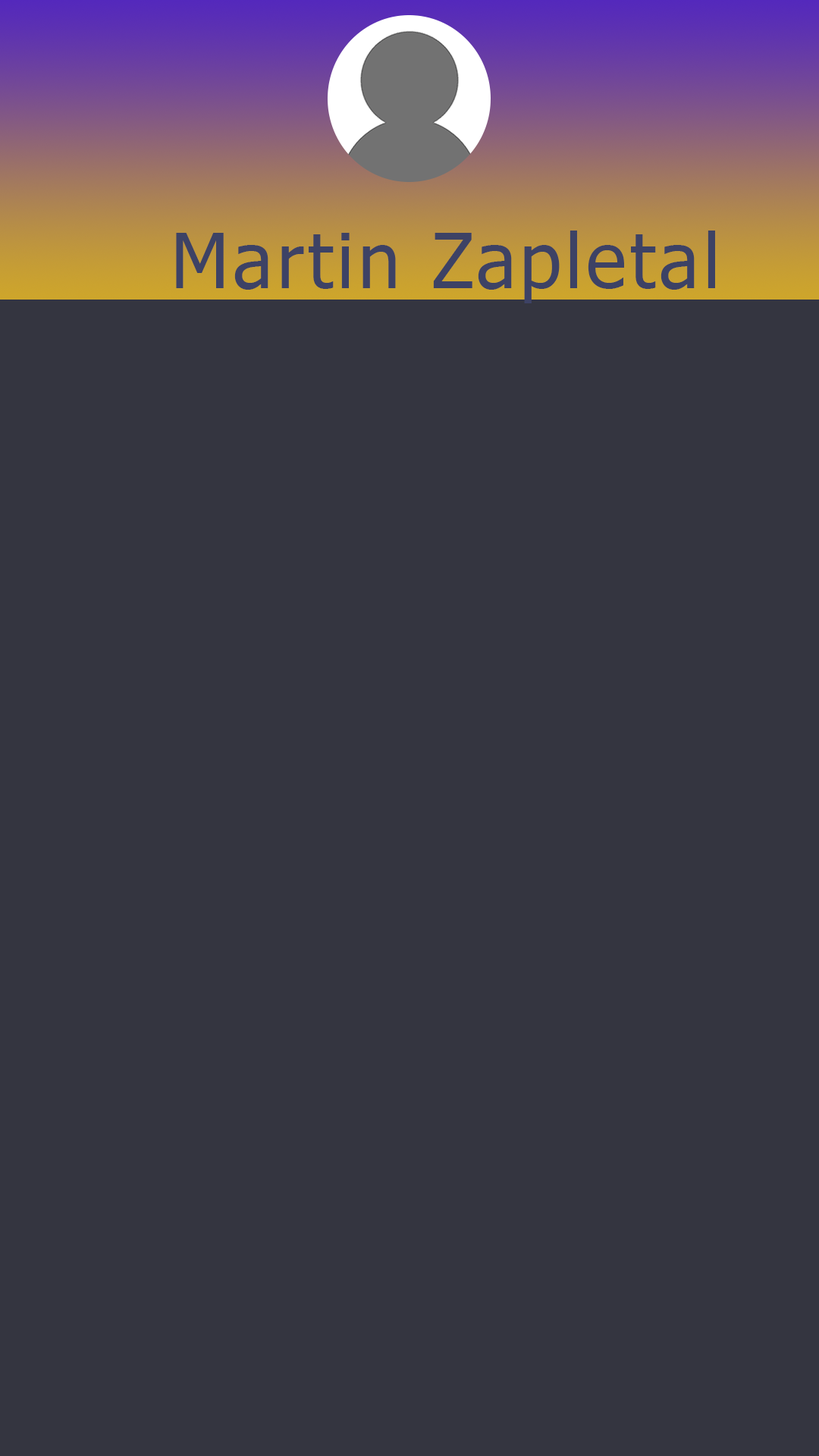
<style>
.page{position:relative;width:819px;height:1456px;background:#343540}
.page>*{position:absolute;margin:0}
.t1{font:75.8px "Tahoma";letter-spacing:0.05em;color:#3d4265}
</style>
<div class="page">
<p class="t1" style="left:176px;top:231px;width:539px;height:72px">Martin Zapletal</p>
</div>
